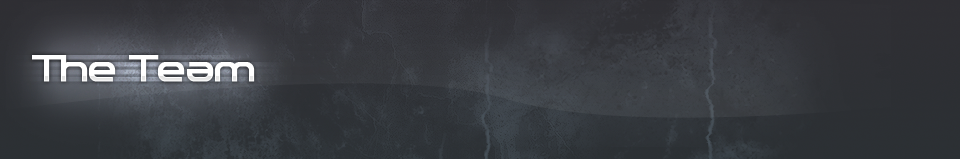
<style>
.page{position:relative;width:960px;height:159px}
.page>*{position:absolute;margin:0}
.t1{font:36px "Dekers_Bold";color:#ffffff;font-weight:bold}
</style>
<div class="page">
<p class="t1" style="left:32px;top:55px;width:223px;height:27px">The Team.</p>
</div>
